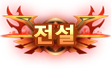
<style>
.page{position:relative;width:111px;height:69px}
.page>*{position:absolute;margin:0}
.t1{font:21px "MalgunGothicBold";font-weight:bold}
</style>
<div class="page">
<p class="t1" style="left:34px;top:24px;width:40px;height:21px">전설</p>
</div>
